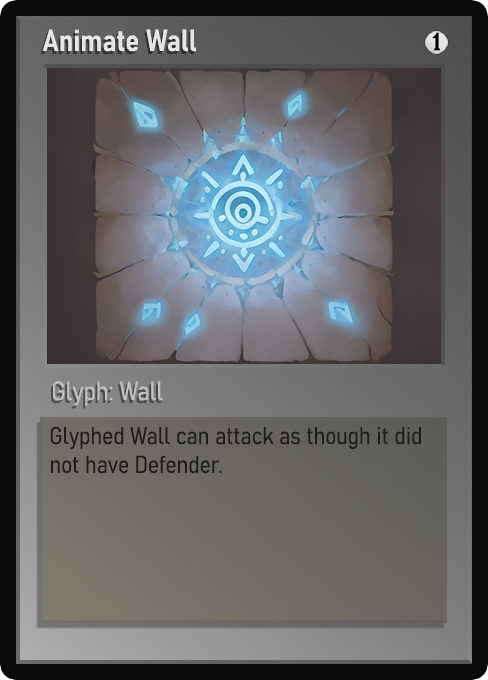
<style>
.page{position:relative;width:488px;height:680px}
.page>*{position:absolute;margin:0}
.t1{font:30px "Bahnschrift-SemiBoldSemiCondensed";color:#f2f2f2;font-weight:bold}
.t2{font:25px "WTRRoycroft";color:#000000;font-weight:bold;scale:1.09 1}
.t3{font:26px "Bahnschrift-LightSemiCondensed";color:#c8c8c8;font-weight:bold}
.t4{font:24px "Bahnschrift-LightSemiCondensed";color:#1e1e1e;font-weight:bold}
</style>
<div class="page">
<p class="t1" style="left:42px;top:29px;width:154px;height:23px;opacity:0.9">Animate Wall</p>
<p class="t2" style="left:432px;top:32px;width:9px;height:19px">1</p>
<p class="t3" style="left:53px;top:381px;width:110px;height:25px;opacity:0.9">Glyph: Wall</p>
<p class="t4" style="left:50px;top:426px;width:371px;height:48px">Glyphed Wall can attack as though it did not have Defender.</p>
</div>
